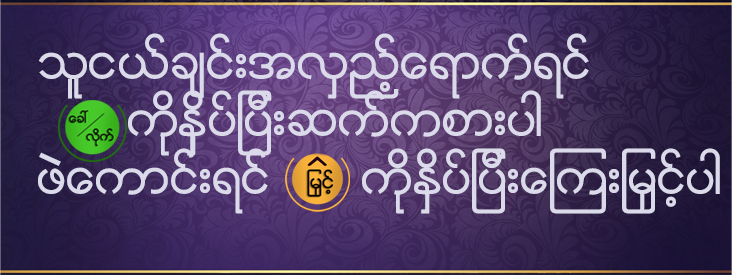
<style>
.page{position:relative;width:732px;height:275px}
.page>*{position:absolute;margin:0}
.t1{font:48px "Zawgyi-One";color:#dbdaeb;text-transform:uppercase}
</style>
<div class="page">
<p class="t1" style="left:38px;top:33px;width:682px;height:181px">သူငယ္ခ်င္းအလွည့္ေရာက္ရင္<br>      ကိုနွိပ္ျပီးဆက္ကစားပါ<br>ဖဲေကာင္းရင္      ကိုနွိပ္ျပီးေၾကးျမွင့္ပါ</p>
</div>
